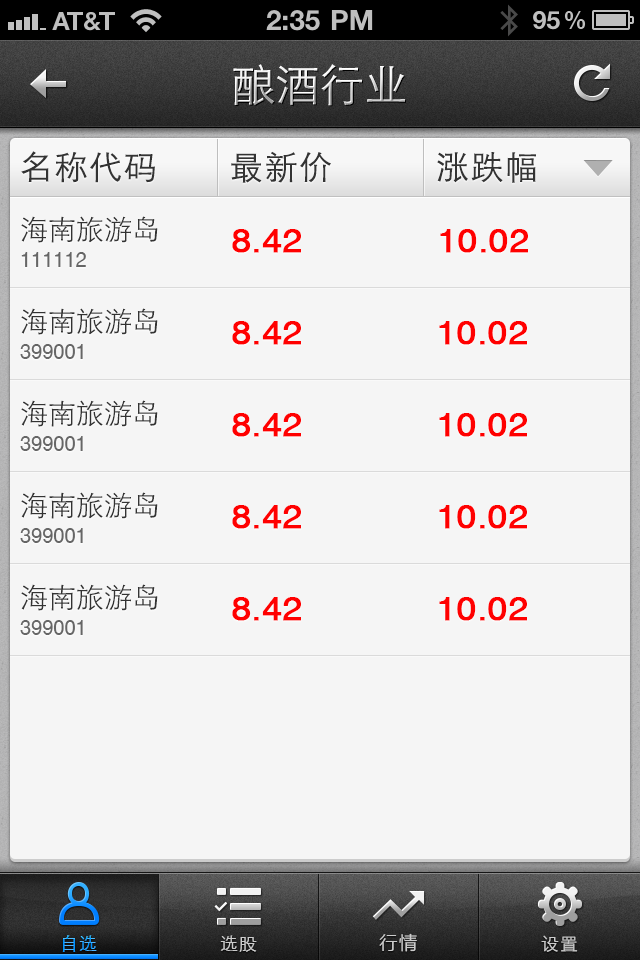
<style>
.page{position:relative;width:640px;height:960px;background:#f5f5f5}
.page>*{position:absolute;margin:0}
.t1{font:44px "STXihei";letter-spacing:0.005em}
.t2{font:33px "STXihei";letter-spacing:0.05em;color:#333333}
.t3{font:28px "STXihei";color:#333333}
.t4{font:33.2px "HelveticaCE-Regular";color:#ff0000;font-weight:bold;scale:1.05 1}
.t5{font:20px "HelveticaCE-Regular";color:#5c6370}
.t6{font:18px "STXihei";letter-spacing:0.05em}
.t7{font:18px "STXihei";letter-spacing:0.05em;color:#cccccc}
.t8{font:18px "MicrosoftYaHei";letter-spacing:0.1em;color:#cccccc}
</style>
<div class="page">
<p class="t1" style="left:233px;top:64px;width:172px;height:42px">酿酒行业</p>
<p class="t2" style="left:21px;top:151px;width:134px;height:32px">名称代码</p>
<p class="t2" style="left:231px;top:151px;width:100px;height:32px">最新价</p>
<p class="t2" style="left:437px;top:152px;width:99px;height:31px">涨跌幅</p>
<p class="t3" style="left:21px;top:216px;width:137px;height:27px">海南旅游岛</p>
<p class="t4" style="left:232px;top:229px;width:69px;height:24px">8.42</p>
<p class="t4" style="left:440px;top:229px;width:88px;height:24px">10.02</p>
<p class="t5" style="left:21px;top:252px;width:65px;height:15px">111112</p>
<p class="t3" style="left:21px;top:308px;width:137px;height:27px">海南旅游岛</p>
<p class="t4" style="left:232px;top:321px;width:69px;height:24px">8.42</p>
<p class="t4" style="left:439px;top:321px;width:88px;height:24px">10.02</p>
<p class="t5" style="left:20px;top:344px;width:63px;height:15px">399001</p>
<p class="t3" style="left:21px;top:400px;width:137px;height:27px">海南旅游岛</p>
<p class="t4" style="left:232px;top:413px;width:69px;height:24px">8.42</p>
<p class="t4" style="left:439px;top:413px;width:88px;height:24px">10.02</p>
<p class="t5" style="left:20px;top:436px;width:63px;height:15px">399001</p>
<p class="t3" style="left:21px;top:492px;width:137px;height:27px">海南旅游岛</p>
<p class="t4" style="left:232px;top:505px;width:69px;height:24px">8.42</p>
<p class="t4" style="left:439px;top:505px;width:88px;height:24px">10.02</p>
<p class="t5" style="left:20px;top:528px;width:63px;height:15px">399001</p>
<p class="t3" style="left:21px;top:584px;width:137px;height:27px">海南旅游岛</p>
<p class="t4" style="left:232px;top:597px;width:69px;height:24px">8.42</p>
<p class="t4" style="left:439px;top:597px;width:88px;height:24px">10.02</p>
<p class="t5" style="left:20px;top:620px;width:63px;height:15px">399001</p>
<p class="t6" style="left:62px;top:935px;width:35px;height:17px">自选</p>
<p class="t7" style="left:220px;top:935px;width:37px;height:17px">选股</p>
<p class="t8" style="left:379px;top:933px;width:38px;height:19px">行情</p>
<p class="t7" style="left:541px;top:935px;width:37px;height:17px">设置</p>
</div>
